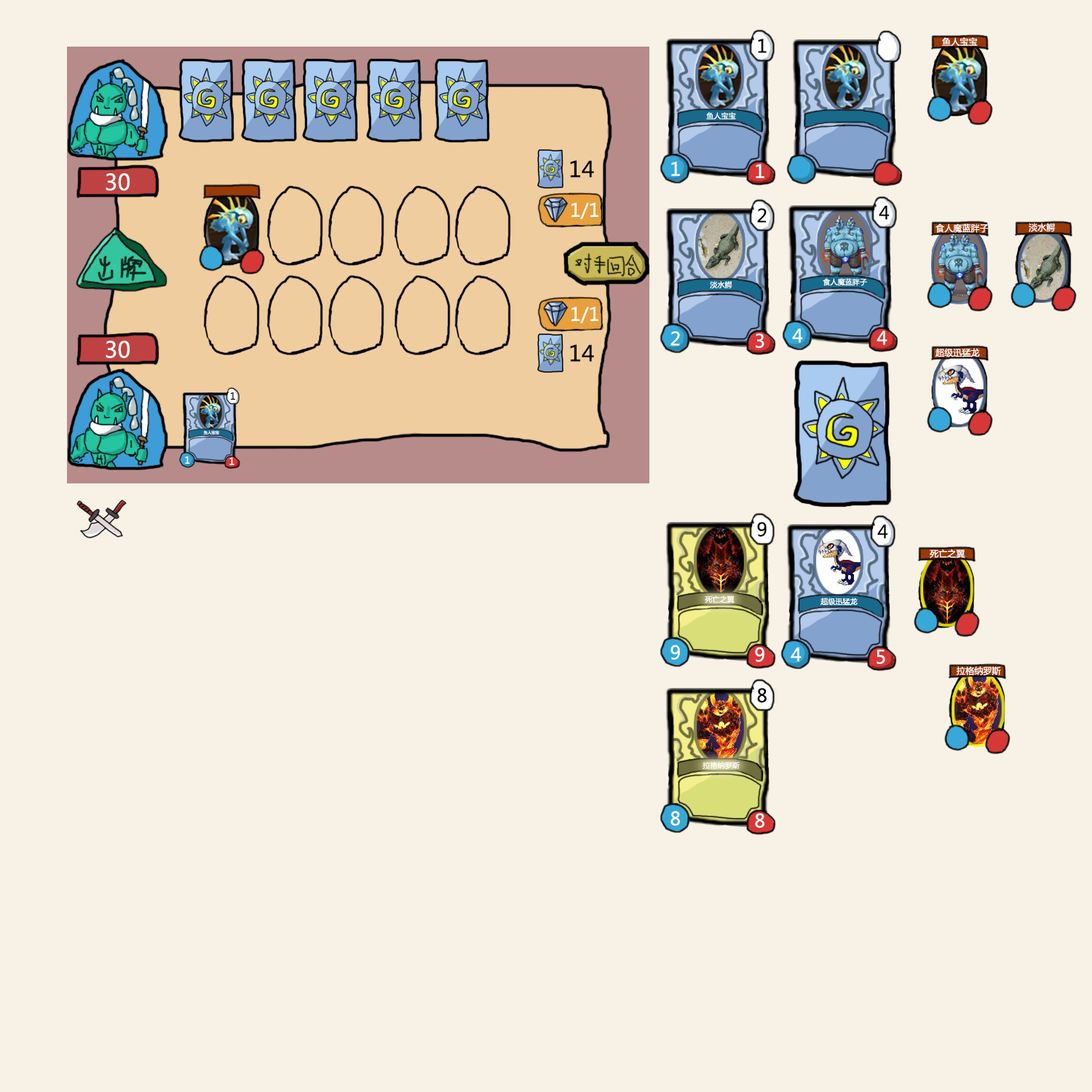
<style>
.page{position:relative;width:1092px;height:1092px;background:#f8f2e6}
.page>*{position:absolute;margin:0}
.t1{font:18.2px "MicrosoftYaHei";letter-spacing:0.01em;color:#010101}
.t2{font:8.7px "MicrosoftYaHei";letter-spacing:0.01em;color:#fffffe}
.t3{font:7.3px "MicrosoftYaHei";letter-spacing:0.01em;color:#ffffff}
.t4{font:21.8px "MicrosoftYaHei";letter-spacing:0.01em;color:#000000}
.t5{font:18.2px "MicrosoftYaHei";letter-spacing:0.01em;color:#ffffff}
.t6{font:21.8px "MicrosoftYaHei";letter-spacing:0.01em;color:#ffffff}
.t7{font:18.2px "MicrosoftYaHei";letter-spacing:0.01em;color:#fffffe}
.t8{font:9.5px "MicrosoftYaHei";letter-spacing:0.01em;color:#010101}
.t9{font:3.8px "MicrosoftYaHei";letter-spacing:0.01em;color:#ffffff}
.t10{font:9.5px "MicrosoftYaHei";letter-spacing:0.01em;color:#ffffff}
</style>
<div class="page">
<p class="t1" style="left:758px;top:39px;width:9px;height:14px">1</p>
<p class="t2" style="left:942px;top:37px;width:36px;height:10px">鱼人宝宝</p>
<p class="t3" style="left:706px;top:112px;width:30px;height:8px">鱼人宝宝</p>
<p class="t4" style="left:570px;top:160px;width:24px;height:18px">14</p>
<p class="t5" style="left:671px;top:162px;width:9px;height:14px">1</p>
<p class="t6" style="left:106px;top:173px;width:24px;height:18px">30</p>
<p class="t5" style="left:756px;top:164px;width:8px;height:14px">1</p>
<p class="t7" style="left:571px;top:202px;width:27px;height:17px">1/1</p>
<p class="t1" style="left:757px;top:208px;width:10px;height:15px">2</p>
<p class="t1" style="left:879px;top:205px;width:11px;height:15px">4</p>
<p class="t2" style="left:935px;top:223px;width:54px;height:10px">食人魔蓝胖子</p>
<p class="t2" style="left:1029px;top:223px;width:27px;height:9px">淡水鳄</p>
<p class="t3" style="left:710px;top:281px;width:22px;height:8px">淡水鳄</p>
<p class="t3" style="left:823px;top:278px;width:44px;height:8px">食人魔蓝胖子</p>
<p class="t7" style="left:571px;top:306px;width:27px;height:17px">1/1</p>
<p class="t5" style="left:792px;top:328px;width:11px;height:15px">4</p>
<p class="t6" style="left:106px;top:341px;width:24px;height:17px">30</p>
<p class="t5" style="left:670px;top:331px;width:10px;height:15px">2</p>
<p class="t5" style="left:756px;top:333px;width:8px;height:15px">3</p>
<p class="t5" style="left:877px;top:331px;width:10px;height:14px">4</p>
<p class="t4" style="left:570px;top:344px;width:24px;height:18px">14</p>
<p class="t2" style="left:935px;top:348px;width:45px;height:9px">超级迅猛龙</p>
<p class="t8" style="left:231px;top:392px;width:4px;height:8px">1</p>
<p class="t9" style="left:203px;top:430px;width:16px;height:5px">鱼人宝宝</p>
<p class="t10" style="left:185px;top:456px;width:5px;height:8px">1</p>
<p class="t10" style="left:229px;top:457px;width:5px;height:8px">1</p>
<p class="t1" style="left:757px;top:522px;width:10px;height:15px">9</p>
<p class="t1" style="left:877px;top:524px;width:11px;height:15px">4</p>
<p class="t2" style="left:930px;top:549px;width:35px;height:9px">死亡之翼</p>
<p class="t3" style="left:705px;top:595px;width:30px;height:9px">死亡之翼</p>
<p class="t3" style="left:820px;top:598px;width:38px;height:8px">超级迅猛龙</p>
<p class="t5" style="left:670px;top:645px;width:10px;height:15px">9</p>
<p class="t5" style="left:755px;top:647px;width:9px;height:15px">9</p>
<p class="t5" style="left:791px;top:647px;width:11px;height:15px">4</p>
<p class="t5" style="left:877px;top:649px;width:8px;height:15px">5</p>
<p class="t2" style="left:957px;top:666px;width:44px;height:10px">拉格纳罗斯</p>
<p class="t1" style="left:757px;top:688px;width:10px;height:15px">8</p>
<p class="t3" style="left:703px;top:761px;width:37px;height:8px">拉格纳罗斯</p>
<p class="t5" style="left:670px;top:811px;width:10px;height:15px">8</p>
<p class="t5" style="left:755px;top:813px;width:9px;height:15px">8</p>
</div>
